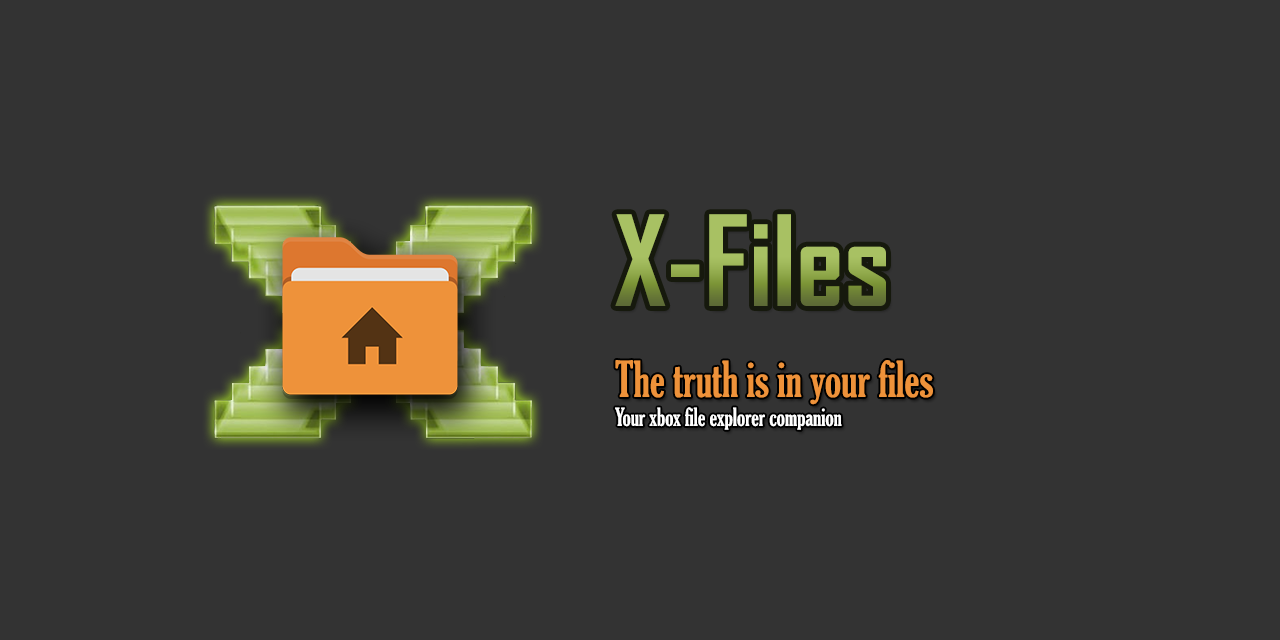
<style>
.page{position:relative;width:1280px;height:640px;background:#333333}
.page>*{position:absolute;margin:0}
.t1{font:120px "AgencyFB-Bold"}
.t2{font:24px "GloucesterMT-ExtraCondensed";color:#ffffff}
.t3{font:48px "GloucesterMT-ExtraCondensed";color:#ee923a}
</style>
<div class="page">
<p class="t1" style="left:615px;top:214px;width:271px;height:92px">X-Files</p>
<p class="t2" style="left:615px;top:360px;width:318px;height:70px"><span class="t3">The truth is in your files<br></span>Your xbox file explorer companion</p>
</div>
